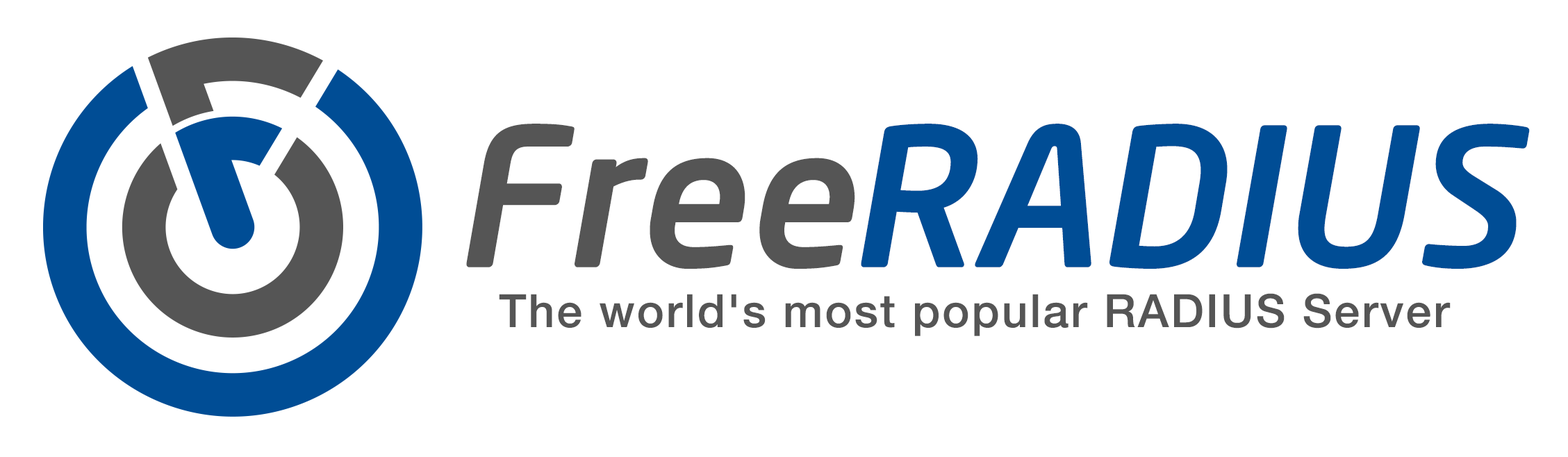
<style>
.page{position:relative;width:1568px;height:457px;background:#ffffff}
.page>*{position:absolute;margin:0}
.t1{font:191.1px "NeoSans-MediumItalic";color:#555555}
.t2{font:191.1px "NeoSans-MediumItalic";color:#004d95}
.t3{font:45.9px "HelveticaNeueLTCom-Md";letter-spacing:0.045em;color:#555555}
</style>
<div class="page">
<p class="t1" style="left:466px;top:124px;width:389px;height:145px">Free</p>
<p class="t2" style="left:861px;top:124px;width:669px;height:145px">RADIUS</p>
<p class="t3" style="left:499px;top:293px;width:952px;height:43px">The world's most popular RADIUS Server</p>
</div>
